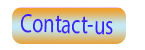
<style>
.page{position:relative;width:145px;height:50px;background:#ffffff}
.page>*{position:absolute;margin:0}
.t1{font:26.6px "MyriadPro-Regular";color:#3e20f2;scale:0.77 1}
</style>
<div class="page">
<p class="t1" style="left:21px;top:14px;width:92px;height:21px;rotate:2deg">Contact-us</p>
</div>
